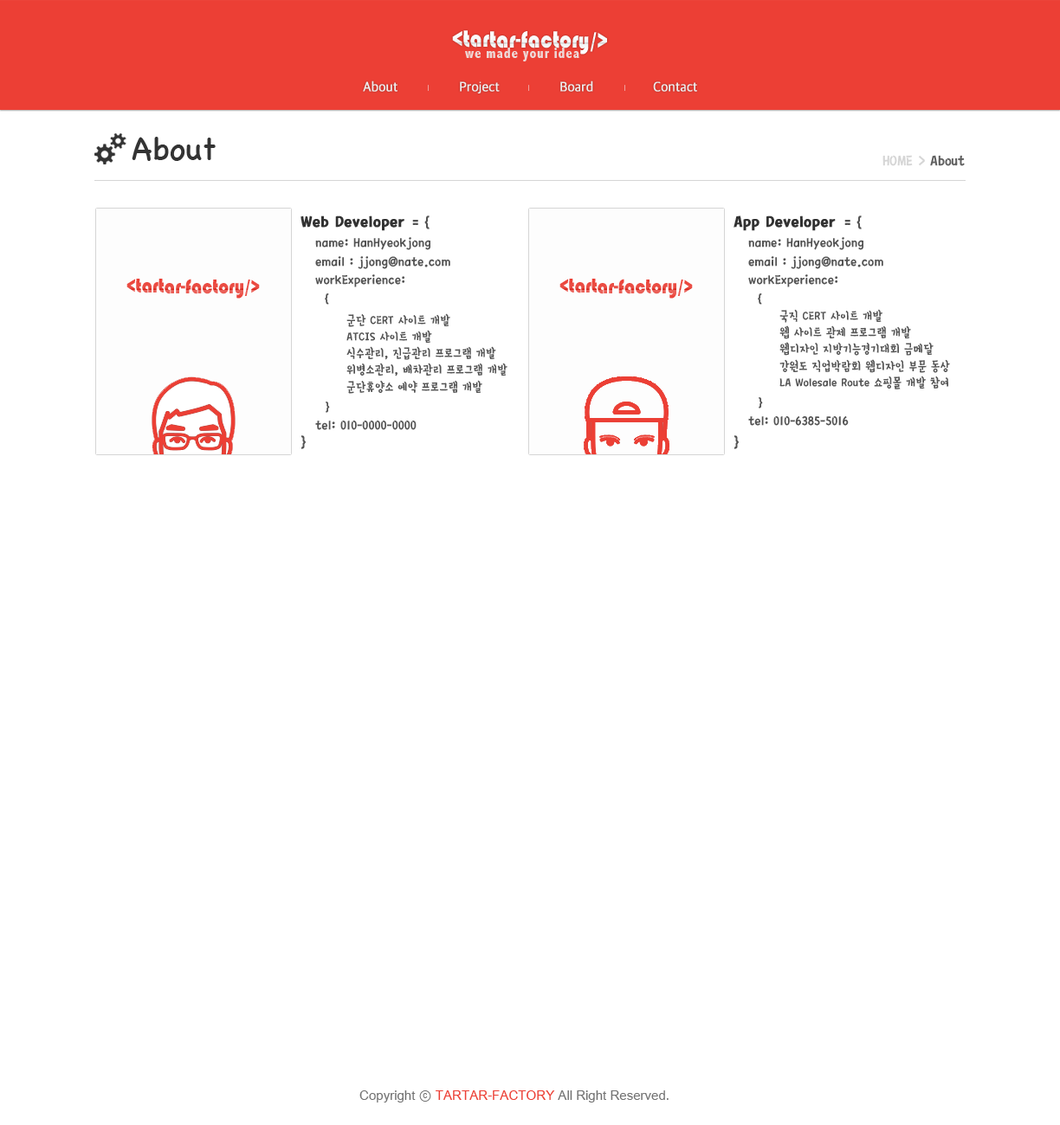
<style>
.page{position:relative;width:1060px;height:1125px;background:#ffffff}
.page>*{position:absolute;margin:0}
.t1{font:24.2px "Bauhaus93";color:#ffffff;scale:0.88 1}
.t2{font:14.7px "AbadiMT-CondensedExtraBold";letter-spacing:0.05em;color:#eeeeee;scale:0.95 1}
.t3{font:13.9px "AppleSDGothicNeo-Regular";letter-spacing:-0.01em;color:#ededed;font-weight:bold;scale:0.95 1}
.t4{font:32.9px "ChalkboardSE-Regular";color:#333333;scale:0.95 1}
.t5{font:17.3px "KoreanGST-R";color:#d5d5d5;scale:0.95 1}
.t6{font:17.3px "KoreanGST-R";color:#606060;scale:0.95 1}
.t7{font:19px "KoreanGST-R";color:#323232;font-weight:bold}
.t8{font:19.2px "KoreanGST-R";color:#535353;scale:0.95 1}
.t9{font:13.9px "KoreanGST-R";color:#535353}
.t10{font:15.6px "KoreanGST-R";color:#535353}
.t11{font:20.8px "Bauhaus93";scale:0.88 1}
.t12{font:13.9px "ArialUnicodeMS";letter-spacing:-0.005em;color:#727272;scale:0.95 1}
.t13{font:13.9px "ArialUnicodeMS";letter-spacing:-0.005em;color:#ec3f35;scale:0.95 1}
</style>
<div class="page">
<p class="t1" style="left:452px;top:30px;width:155px;height:25px;rotate:1deg">&lt;tartar-factory/&gt;</p>
<p class="t2" style="left:465px;top:48px;width:114px;height:13px;opacity:0.87">we made your idea</p>
<p class="t3" style="left:363px;top:81px;width:34px;height:11px">About</p>
<p class="t3" style="left:460px;top:81px;width:39px;height:12px">Project</p>
<p class="t3" style="left:560px;top:81px;width:33px;height:11px">Board</p>
<p class="t3" style="left:653px;top:81px;width:44px;height:11px">Contact</p>
<p class="t4" style="left:132px;top:137px;width:84px;height:24px">About</p>
<p class="t5" style="left:882px;top:155px;width:82px;height:11px">HOME &gt; <span class="t6">About</span></p>
<p class="t7" style="left:300px;top:216px;width:104px;height:15px">Web Developer</p>
<p class="t8" style="left:412px;top:216px;width:17px;height:13px">= {</p>
<p class="t7" style="left:733px;top:216px;width:102px;height:15px">App Developer</p>
<p class="t8" style="left:844px;top:216px;width:17px;height:13px">= {</p>
<p class="t9" style="left:315px;top:237px;width:192px;height:193px"><span class="t10">name: HanHyeokjong<br>email : jjong@nate.com<br>workExperience:<br>  {<br> </span>군단 CERT 사이트 개발<br> ATCIS 사이트 개발<br> 식수관리, 진급관리 프로그램 개발<br> 위병소관리, 배차관리 프로그램 개발<br> 군단휴양소 예약 프로그램 개발<br> <span class="t10"> }<br>tel: 010-0000-0000</span></p>
<p class="t9" style="left:748px;top:237px;width:202px;height:189px"><span class="t10">name: HanHyeokjong<br>email : jjong@nate.com<br>workExperience:<br>  {<br></span> 국직 CERT 사이트 개발<br> 웹 사이트 관제 프로그램 개발<br> 웹디자인 지방기능경기대회 금메달<br> 강원도 직업박람회 웹디자인 부문 동상<br> LA Wolesale Route 쇼핑몰 개발 참여<br> <span class="t10"> }<br>tel: 010-6385-5016</span></p>
<p class="t11" style="left:126px;top:279px;width:134px;height:20px;rotate:1deg">&lt;tartar-factory/&gt;</p>
<p class="t11" style="left:559px;top:279px;width:134px;height:20px;rotate:1deg">&lt;tartar-factory/&gt;</p>
<p class="t8" style="left:301px;top:435px;width:5px;height:14px">}</p>
<p class="t8" style="left:734px;top:435px;width:5px;height:14px">}</p>
<p class="t12" style="left:359px;top:1091px;width:309px;height:12px">Copyright ⓒ <span class="t13">TARTAR-FACTORY </span>All Right Reserved.</p>
</div>
